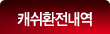
<style>
.page{position:relative;width:110px;height:34px}
.page>*{position:absolute;margin:0}
.t1{font:16px "YDIYGO330";letter-spacing:-0.05em;color:#ffffff;scale:0.9 1}
</style>
<div class="page">
<p class="t1" style="left:17px;top:12px;width:75px;height:15px">캐쉬환전내역</p>
</div>
